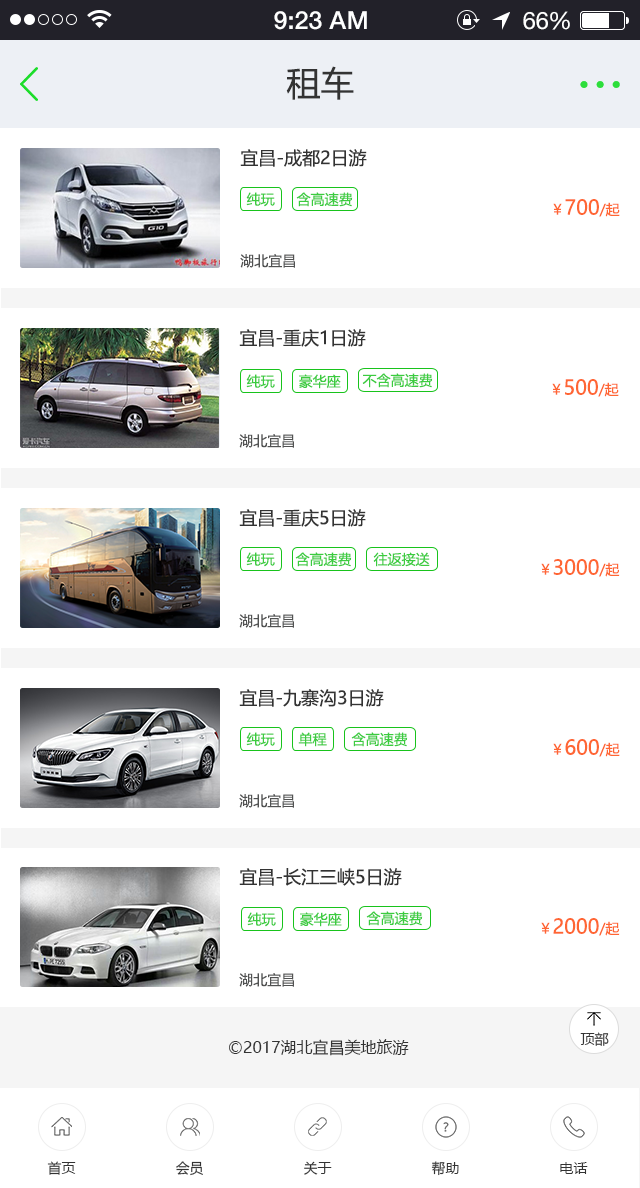
<style>
.page{position:relative;width:640px;height:1188px;background:#ffffff}
.page>*{position:absolute;margin:0}
.t1{font:25px "HelveticaNeue-Medium";color:#ffffff}
.t2{font:24px "HelveticaNeue";color:#ffffff}
.t3{font:24px "HelveticaNeue";letter-spacing:-0.02em;color:#ffffff}
.t4{font:34px "MicrosoftYaHei";color:#333333}
.t5{font:18px "MicrosoftYaHei";color:#333333}
.t6{font:14px "MicrosoftYaHei";color:#3bcc3f}
.t7{font:20px "MicrosoftYaHei";color:#ff6633}
.t8{font:14px "MicrosoftYaHei";color:#ff6633}
.t9{font:14px "MicrosoftYaHei";color:#515252}
.t10{font:14px "MicrosoftYaHei";color:#333333}
.t11{font:16px "MicrosoftYaHei";color:#333333}
</style>
<div class="page">
<p class="t1" style="left:274px;top:11px;width:93px;height:19px">9:23 AM</p>
<p class="t2" style="left:523px;top:11px;width:47px;height:19px">6<span class="t3">6</span>%</p>
<p class="t4" style="left:286px;top:66px;width:68px;height:34px">租车</p>
<p class="t5" style="left:240px;top:149px;width:127px;height:18px">宜昌-成都2日游</p>
<p class="t6" style="left:246px;top:192px;width:29px;height:15px">纯玩</p>
<p class="t6" style="left:296px;top:192px;width:57px;height:15px">含高速费</p>
<p class="t7" style="left:553px;top:199px;width:67px;height:18px"><span class="t8">￥</span>700<span class="t8">/起</span></p>
<p class="t9" style="left:240px;top:254px;width:55px;height:14px">湖北宜昌</p>
<p class="t5" style="left:239px;top:329px;width:127px;height:18px">宜昌-重庆1日游</p>
<p class="t6" style="left:246px;top:374px;width:29px;height:15px">纯玩</p>
<p class="t6" style="left:299px;top:374px;width:42px;height:15px">豪华座</p>
<p class="t6" style="left:362px;top:373px;width:71px;height:15px">不含高速费</p>
<p class="t7" style="left:552px;top:379px;width:67px;height:18px"><span class="t8">￥</span>500<span class="t8">/起</span></p>
<p class="t9" style="left:239px;top:434px;width:55px;height:14px">湖北宜昌</p>
<p class="t5" style="left:239px;top:509px;width:127px;height:18px">宜昌-重庆5日游</p>
<p class="t6" style="left:246px;top:552px;width:29px;height:15px">纯玩</p>
<p class="t6" style="left:295px;top:552px;width:57px;height:15px">含高速费</p>
<p class="t6" style="left:373px;top:552px;width:57px;height:15px">往返接送</p>
<p class="t7" style="left:541px;top:559px;width:79px;height:18px"><span class="t8">￥</span>3000<span class="t8">/起</span></p>
<p class="t9" style="left:239px;top:614px;width:55px;height:14px">湖北宜昌</p>
<p class="t5" style="left:239px;top:689px;width:145px;height:18px">宜昌-九寨沟3日游</p>
<p class="t6" style="left:246px;top:732px;width:29px;height:15px">纯玩</p>
<p class="t6" style="left:298px;top:732px;width:29px;height:15px">单程</p>
<p class="t6" style="left:351px;top:732px;width:57px;height:15px">含高速费</p>
<p class="t7" style="left:553px;top:739px;width:67px;height:18px"><span class="t8">￥</span>600<span class="t8">/起</span></p>
<p class="t9" style="left:239px;top:794px;width:55px;height:14px">湖北宜昌</p>
<p class="t5" style="left:239px;top:868px;width:163px;height:18px">宜昌-长江三峡5日游</p>
<p class="t6" style="left:247px;top:912px;width:29px;height:15px">纯玩</p>
<p class="t6" style="left:300px;top:912px;width:42px;height:15px">豪华座</p>
<p class="t6" style="left:366px;top:911px;width:57px;height:15px">含高速费</p>
<p class="t7" style="left:541px;top:918px;width:79px;height:18px"><span class="t8">￥</span>2000<span class="t8">/起</span></p>
<p class="t9" style="left:239px;top:973px;width:55px;height:14px">湖北宜昌</p>
<p class="t10" style="left:580px;top:1032px;width:29px;height:14px">顶部</p>
<p class="t11" style="left:229px;top:1039px;width:180px;height:17px">©2017湖北宜昌美地旅游</p>
<p class="t10" style="left:47px;top:1161px;width:29px;height:14px">首页</p>
<p class="t10" style="left:176px;top:1161px;width:27px;height:15px">会员</p>
<p class="t10" style="left:304px;top:1161px;width:28px;height:14px">关于</p>
<p class="t10" style="left:431px;top:1161px;width:28px;height:15px">帮助</p>
<p class="t10" style="left:560px;top:1162px;width:28px;height:12px">电话</p>
</div>
